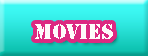
<style>
.page{position:relative;width:148px;height:56px}
.page>*{position:absolute;margin:0}
.t1{font:20px "StencilStd";color:#fcf6f6}
</style>
<div class="page">
<p class="t1" style="left:35px;top:24px;width:78px;height:15px">MOVIES</p>
</div>
